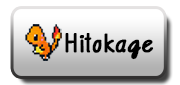
<style>
.page{position:relative;width:180px;height:85px;background:#ffffff}
.page>*{position:absolute;margin:0}
.t1{font:32.6px "WRTishKid";color:#000000;font-weight:bold}
</style>
<div class="page">
<p class="t1" style="left:65px;top:33px;width:89px;height:27px">Hitokage</p>
</div>
